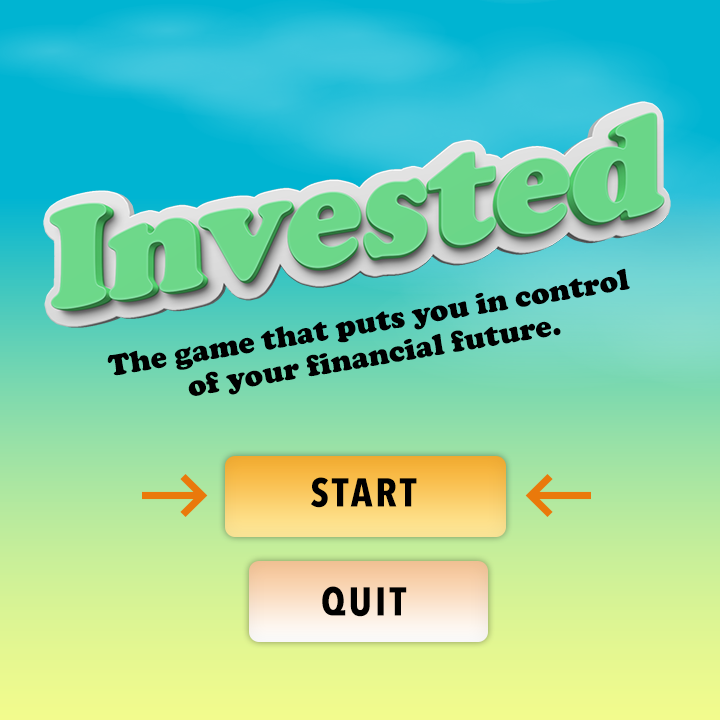
<style>
.page{position:relative;width:720px;height:720px}
.page>*{position:absolute;margin:0}
.t1{font:30.8px "CooperBlack";color:#000000}
.t2{font:40px "AvenirNextCondensed-Bold";letter-spacing:0.075em;color:#000000}
</style>
<div class="page">
<p class="t1" style="left:107px;top:268px;width:523px;height:128px;rotate:-10deg">The game that puts you in control of your financial future.</p>
<p class="t2" style="left:311px;top:477px;width:106px;height:31px">START</p>
<p class="t2" style="left:322px;top:586px;width:85px;height:31px">QUIT</p>
</div>
